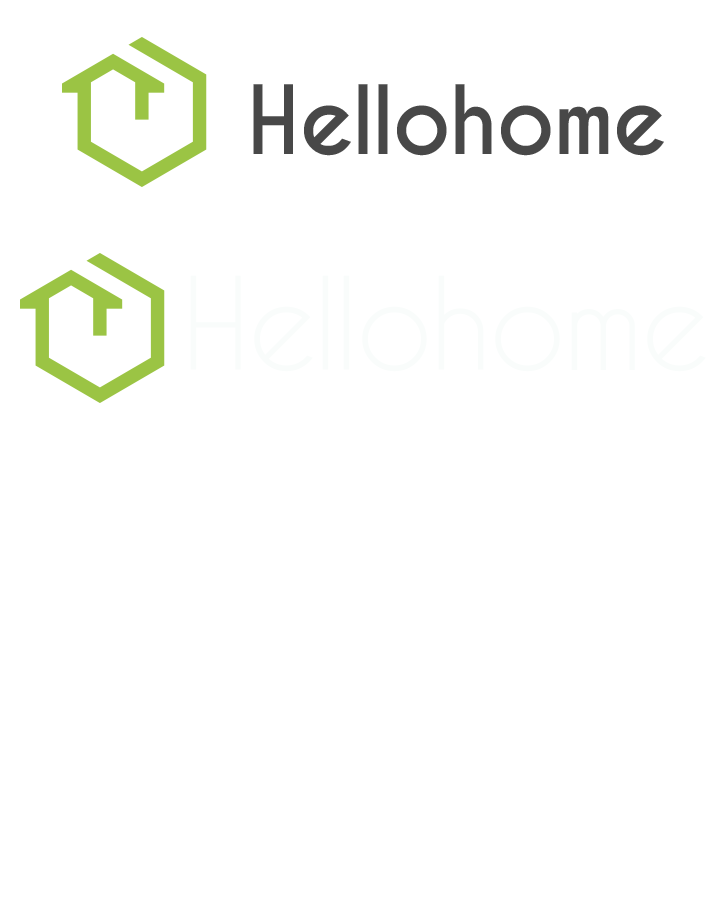
<style>
.page{position:relative;width:725px;height:899px;background:#ffffff}
.page>*{position:absolute;margin:0}
.t1{font:89.2px "CaviarDreams-Bold";color:#484848}
.t2{font:120.4px "CaviarDreams";color:#f9fcfb}
</style>
<div class="page">
<p class="t1" style="left:253px;top:84px;width:411px;height:72px">Hellohome</p>
<p class="t2" style="left:190px;top:275px;width:516px;height:97px">Hellohome</p>
</div>
